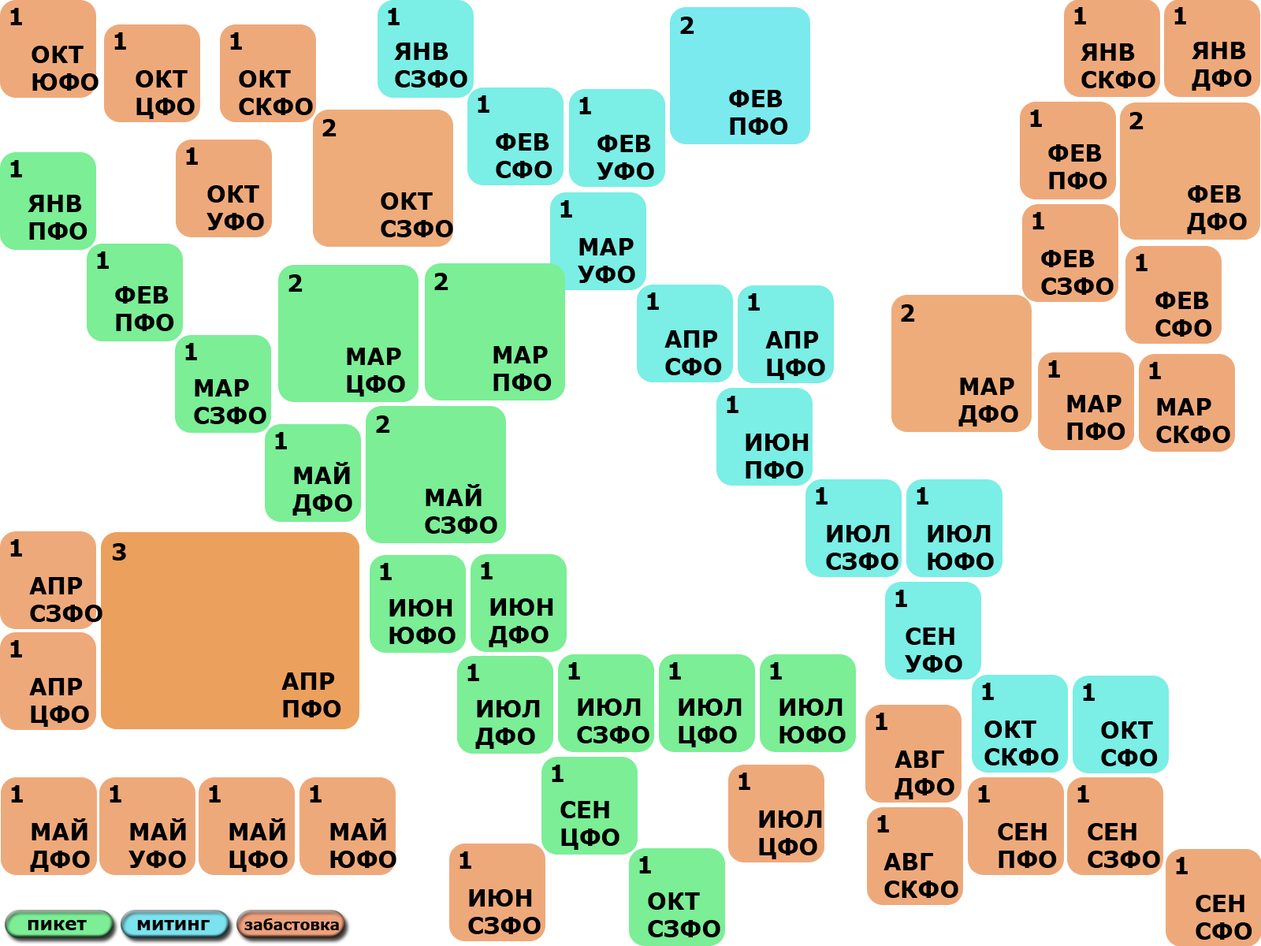
<style>
.page{position:relative;width:1261px;height:946px;background:#ffffff}
.page>*{position:absolute;margin:0}
.t1{font:23px "Verdana-Bold";color:#000000}
</style>
<div class="page">
<p class="t1" style="left:10px;top:8px;width:12px;height:17px">1</p>
<p class="t1" style="left:388px;top:8px;width:12px;height:17px">1</p>
<p class="t1" style="left:680px;top:17px;width:14px;height:17px">2</p>
<p class="t1" style="left:1074px;top:7px;width:12px;height:17px">1</p>
<p class="t1" style="left:1174px;top:7px;width:12px;height:17px">1</p>
<p class="t1" style="left:114px;top:32px;width:12px;height:18px">1</p>
<p class="t1" style="left:230px;top:32px;width:12px;height:18px">1</p>
<p class="t1" style="left:1192px;top:42px;width:59px;height:49px">ЯНВ<br>ДФО</p>
<p class="t1" style="left:32px;top:46px;width:67px;height:45px">ОКТ<br>ЮФО</p>
<p class="t1" style="left:394px;top:43px;width:73px;height:44px">ЯНВ<br>СЗФО</p>
<p class="t1" style="left:1080px;top:43px;width:75px;height:45px">ЯНВ<br>СКФО</p>
<p class="t1" style="left:136px;top:70px;width:59px;height:49px">ОКТ<br>ЦФО</p>
<p class="t1" style="left:239px;top:70px;width:74px;height:45px">ОКТ<br>СКФО</p>
<p class="t1" style="left:729px;top:90px;width:59px;height:45px">ФЕВ<br>ПФО</p>
<p class="t1" style="left:478px;top:95px;width:11px;height:18px">1</p>
<p class="t1" style="left:579px;top:97px;width:12px;height:17px">1</p>
<p class="t1" style="left:1030px;top:110px;width:12px;height:17px">1</p>
<p class="t1" style="left:1129px;top:112px;width:14px;height:17px">2</p>
<p class="t1" style="left:322px;top:119px;width:15px;height:17px">2</p>
<p class="t1" style="left:496px;top:133px;width:56px;height:45px">ФЕВ<br>СФО</p>
<p class="t1" style="left:597px;top:135px;width:57px;height:45px">ФЕВ<br>УФО</p>
<p class="t1" style="left:186px;top:147px;width:12px;height:18px">1</p>
<p class="t1" style="left:1048px;top:144px;width:59px;height:45px">ФЕВ<br>ПФО</p>
<p class="t1" style="left:10px;top:160px;width:12px;height:17px">1</p>
<p class="t1" style="left:206px;top:185px;width:58px;height:45px">ОКТ<br>УФО</p>
<p class="t1" style="left:1187px;top:185px;width:60px;height:49px">ФЕВ<br>ДФО</p>
<p class="t1" style="left:28px;top:195px;width:59px;height:45px">ЯНВ<br>ПФО</p>
<p class="t1" style="left:381px;top:192px;width:72px;height:45px">ОКТ<br>СЗФО</p>
<p class="t1" style="left:560px;top:200px;width:12px;height:18px">1</p>
<p class="t1" style="left:1032px;top:212px;width:12px;height:17px">1</p>
<p class="t1" style="left:578px;top:238px;width:57px;height:45px">МАР<br>УФО</p>
<p class="t1" style="left:97px;top:251px;width:12px;height:18px">1</p>
<p class="t1" style="left:1041px;top:250px;width:73px;height:45px">ФЕВ<br>СЗФО</p>
<p class="t1" style="left:1136px;top:254px;width:11px;height:17px">1</p>
<p class="t1" style="left:288px;top:274px;width:15px;height:18px">2</p>
<p class="t1" style="left:434px;top:273px;width:14px;height:17px">2</p>
<p class="t1" style="left:115px;top:286px;width:59px;height:45px">ФЕВ<br>ПФО</p>
<p class="t1" style="left:647px;top:292px;width:12px;height:18px">1</p>
<p class="t1" style="left:748px;top:293px;width:12px;height:18px">1</p>
<p class="t1" style="left:1155px;top:292px;width:57px;height:45px">ФЕВ<br>СФО</p>
<p class="t1" style="left:901px;top:304px;width:14px;height:18px">2</p>
<p class="t1" style="left:664px;top:330px;width:58px;height:45px">АПР<br>СФО</p>
<p class="t1" style="left:765px;top:331px;width:60px;height:49px">АПР<br>ЦФО</p>
<p class="t1" style="left:185px;top:343px;width:12px;height:17px">1</p>
<p class="t1" style="left:347px;top:348px;width:58px;height:48px">МАР<br>ЦФО</p>
<p class="t1" style="left:493px;top:346px;width:59px;height:45px">МАР<br>ПФО</p>
<p class="t1" style="left:1048px;top:360px;width:12px;height:17px">1</p>
<p class="t1" style="left:1149px;top:362px;width:12px;height:17px">1</p>
<p class="t1" style="left:958px;top:377px;width:60px;height:49px">МАР<br>ДФО</p>
<p class="t1" style="left:194px;top:379px;width:72px;height:45px">МАР<br>СЗФО</p>
<p class="t1" style="left:727px;top:396px;width:11px;height:17px">1</p>
<p class="t1" style="left:1067px;top:395px;width:58px;height:45px">МАР<br>ПФО</p>
<p class="t1" style="left:1156px;top:398px;width:74px;height:45px">МАР<br>СКФО</p>
<p class="t1" style="left:376px;top:415px;width:14px;height:18px">2</p>
<p class="t1" style="left:275px;top:432px;width:12px;height:17px">1</p>
<p class="t1" style="left:746px;top:433px;width:63px;height:45px">ИЮН<br>ПФО</p>
<p class="t1" style="left:292px;top:462px;width:60px;height:53px">МАЙ<br>ДФО</p>
<p class="t1" style="left:425px;top:484px;width:72px;height:50px">МАЙ<br>СЗФО</p>
<p class="t1" style="left:816px;top:487px;width:11px;height:17px">1</p>
<p class="t1" style="left:917px;top:487px;width:11px;height:17px">1</p>
<p class="t1" style="left:826px;top:525px;width:72px;height:45px">ИЮЛ<br>СЗФО</p>
<p class="t1" style="left:928px;top:525px;width:66px;height:45px">ИЮЛ<br>ЮФО</p>
<p class="t1" style="left:10px;top:539px;width:12px;height:17px">1</p>
<p class="t1" style="left:113px;top:543px;width:13px;height:17px">3</p>
<p class="t1" style="left:380px;top:563px;width:12px;height:17px">1</p>
<p class="t1" style="left:481px;top:562px;width:12px;height:17px">1</p>
<p class="t1" style="left:29px;top:577px;width:73px;height:45px">АПР<br>СЗФО</p>
<p class="t1" style="left:895px;top:589px;width:12px;height:18px">1</p>
<p class="t1" style="left:389px;top:599px;width:67px;height:45px">ИЮН<br>ЮФО</p>
<p class="t1" style="left:489px;top:598px;width:64px;height:49px">ИЮН<br>ДФО</p>
<p class="t1" style="left:905px;top:627px;width:57px;height:45px">СЕН<br>УФО</p>
<p class="t1" style="left:10px;top:640px;width:12px;height:17px">1</p>
<p class="t1" style="left:467px;top:664px;width:12px;height:17px">1</p>
<p class="t1" style="left:568px;top:662px;width:12px;height:17px">1</p>
<p class="t1" style="left:669px;top:662px;width:12px;height:17px">1</p>
<p class="t1" style="left:770px;top:662px;width:12px;height:17px">1</p>
<p class="t1" style="left:29px;top:678px;width:60px;height:49px">АПР<br>ЦФО</p>
<p class="t1" style="left:281px;top:672px;width:60px;height:45px">АПР<br>ПФО</p>
<p class="t1" style="left:982px;top:682px;width:12px;height:18px">1</p>
<p class="t1" style="left:1083px;top:683px;width:12px;height:18px">1</p>
<p class="t1" style="left:475px;top:700px;width:65px;height:49px">ИЮЛ<br>ДФО</p>
<p class="t1" style="left:577px;top:698px;width:72px;height:45px">ИЮЛ<br>СЗФО</p>
<p class="t1" style="left:679px;top:698px;width:63px;height:49px">ИЮЛ<br>ЦФО</p>
<p class="t1" style="left:779px;top:698px;width:67px;height:45px">ИЮЛ<br>ЮФО</p>
<p class="t1" style="left:876px;top:712px;width:11px;height:18px">1</p>
<p class="t1" style="left:984px;top:720px;width:74px;height:45px">ОКТ<br>СКФО</p>
<p class="t1" style="left:1101px;top:721px;width:57px;height:45px">ОКТ<br>СФО</p>
<p class="t1" style="left:894px;top:750px;width:60px;height:49px">АВГ<br>ДФО</p>
<p class="t1" style="left:552px;top:764px;width:11px;height:18px">1</p>
<p class="t1" style="left:738px;top:772px;width:12px;height:18px">1</p>
<p class="t1" style="left:11px;top:785px;width:12px;height:17px">1</p>
<p class="t1" style="left:110px;top:785px;width:11px;height:17px">1</p>
<p class="t1" style="left:209px;top:785px;width:12px;height:17px">1</p>
<p class="t1" style="left:310px;top:785px;width:12px;height:17px">1</p>
<p class="t1" style="left:978px;top:785px;width:12px;height:17px">1</p>
<p class="t1" style="left:1077px;top:785px;width:12px;height:17px">1</p>
<p class="t1" style="left:560px;top:801px;width:59px;height:49px">СЕН<br>ЦФО</p>
<p class="t1" style="left:30px;top:818px;width:60px;height:54px">МАЙ<br>ДФО</p>
<p class="t1" style="left:128px;top:818px;width:58px;height:50px">МАЙ<br>УФО</p>
<p class="t1" style="left:229px;top:818px;width:59px;height:54px">МАЙ<br>ЦФО</p>
<p class="t1" style="left:330px;top:818px;width:66px;height:50px">МАЙ<br>ЮФО</p>
<p class="t1" style="left:759px;top:810px;width:63px;height:49px">ИЮЛ<br>ЦФО</p>
<p class="t1" style="left:877px;top:815px;width:12px;height:17px">1</p>
<p class="t1" style="left:998px;top:823px;width:59px;height:45px">СЕН<br>ПФО</p>
<p class="t1" style="left:1088px;top:823px;width:72px;height:45px">СЕН<br>СЗФО</p>
<p class="t1" style="left:459px;top:851px;width:12px;height:17px">1</p>
<p class="t1" style="left:639px;top:856px;width:12px;height:17px">1</p>
<p class="t1" style="left:883px;top:853px;width:75px;height:45px">АВГ<br>СКФО</p>
<p class="t1" style="left:1176px;top:857px;width:12px;height:17px">1</p>
<p class="t1" style="left:468px;top:889px;width:73px;height:45px">ИЮН<br>СЗФО</p>
<p class="t1" style="left:648px;top:892px;width:72px;height:45px">ОКТ<br>СЗФО</p>
<p class="t1" style="left:1196px;top:894px;width:56px;height:45px">СЕН<br>СФО</p>
</div>
